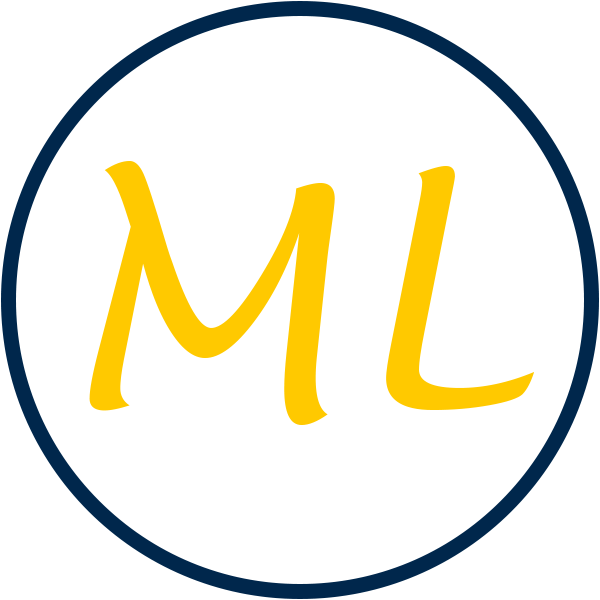
<style>
.page{position:relative;width:600px;height:600px;background:#ffffff}
.page>*{position:absolute;margin:0}
.t1{font:300px "LucidaHandwriting-Italic";letter-spacing:0.015em;color:#ffc900}
</style>
<div class="page">
<p class="t1" style="left:89px;top:161px;width:445px;height:264px">ML</p>
</div>
